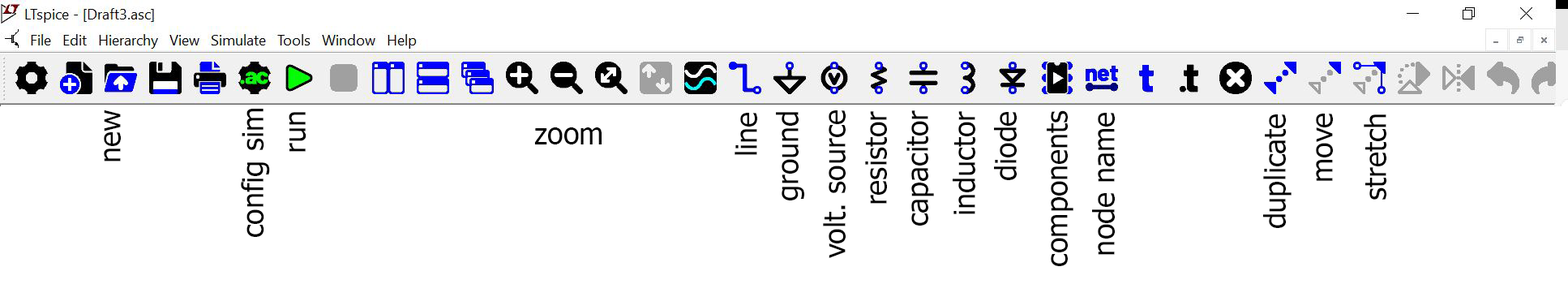
<style>
.page{position:relative;width:1568px;height:284px;background:#ffffff}
.page>*{position:absolute;margin:0}
.t1{font:29.2px "Tahoma";color:#000000}
</style>
<div class="page">
<p class="t1" style="left:104px;top:109px;width:17px;height:52px;rotate:-90deg">new</p>
<p class="t1" style="left:241px;top:109px;width:29px;height:128px;rotate:-90deg">config sim</p>
<p class="t1" style="left:289px;top:112px;width:17px;height:40px;rotate:-90deg">run</p>
<p class="t1" style="left:735px;top:113px;width:22px;height:42px;rotate:-90deg">line</p>
<p class="t1" style="left:776px;top:112px;width:28px;height:88px;rotate:-90deg">ground</p>
<p class="t1" style="left:823px;top:110px;width:23px;height:148px;rotate:-90deg">volt. source</p>
<p class="t1" style="left:865px;top:111px;width:22px;height:92px;rotate:-90deg">resistor</p>
<p class="t1" style="left:906px;top:110px;width:28px;height:115px;rotate:-90deg">capacitor</p>
<p class="t1" style="left:953px;top:111px;width:22px;height:103px;rotate:-90deg">inductor</p>
<p class="t1" style="left:994px;top:112px;width:23px;height:68px;rotate:-90deg">diode</p>
<p class="t1" style="left:1047px;top:110px;width:26px;height:156px;rotate:-90deg">components</p>
<p class="t1" style="left:1092px;top:113px;width:23px;height:142px;rotate:-90deg">node name</p>
<p class="t1" style="left:1316px;top:114px;width:17px;height:67px;rotate:-90deg">move</p>
<p class="t1" style="left:1263px;top:114px;width:29px;height:114px;rotate:-90deg">duplicate</p>
<p class="t1" style="left:1364px;top:114px;width:22px;height:85px;rotate:-90deg">stretch</p>
<p class="t1" style="left:534px;top:127px;width:68px;height:17px">zoom</p>
</div>
